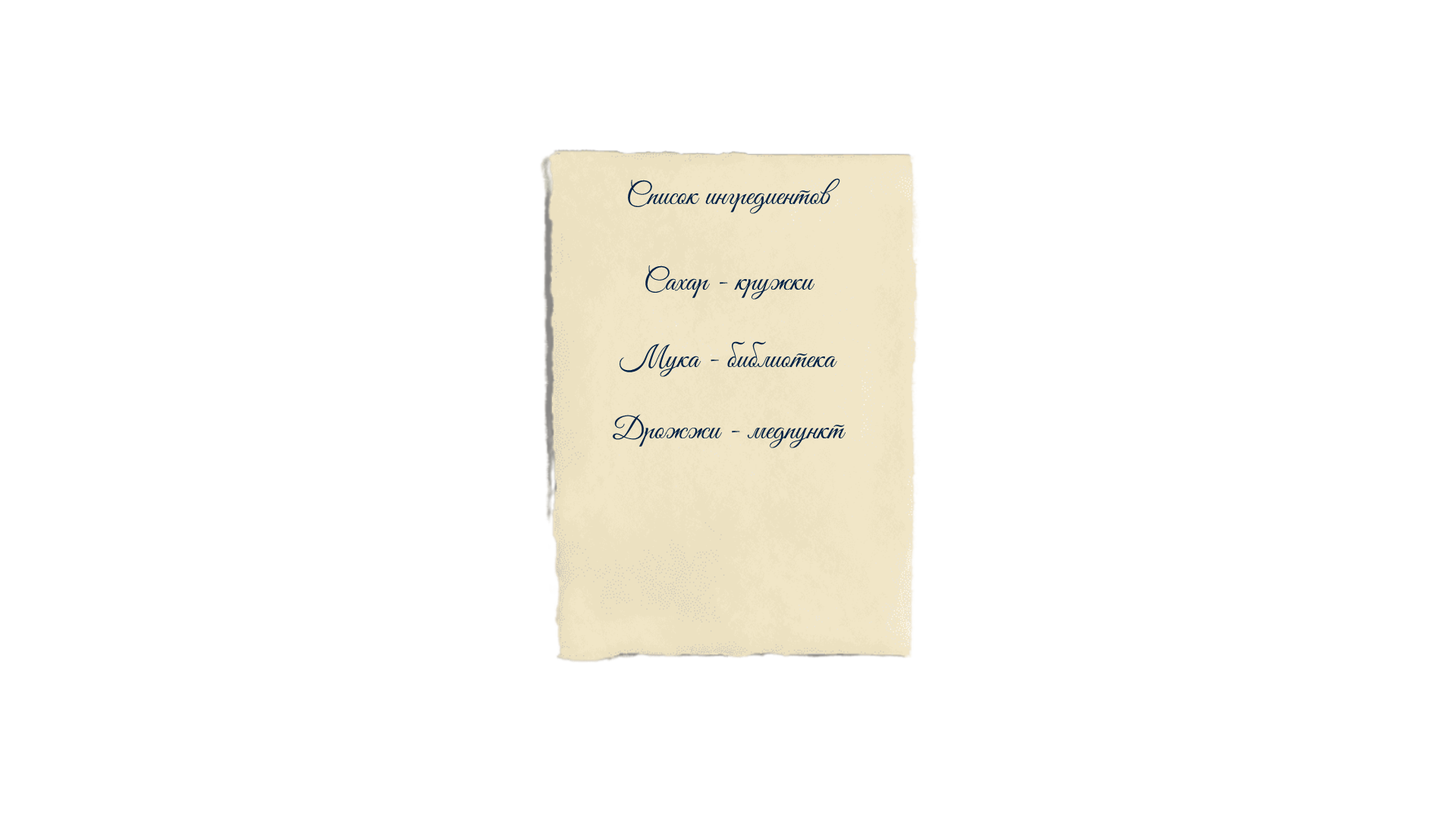
<style>
.page{position:relative;width:1456px;height:819px;background:#ffffff}
.page>*{position:absolute;margin:0}
.t1{font:30.3px "GoodVibesPro";color:#002247}
</style>
<div class="page">
<p class="t1" style="left:628px;top:178px;width:212px;height:36px">Список ингредиентов</p>
<p class="t1" style="left:645px;top:265px;width:170px;height:35px">Сахар - кружки</p>
<p class="t1" style="left:619px;top:341px;width:218px;height:36px">Мука - библиотека</p>
<p class="t1" style="left:612px;top:414px;width:234px;height:34px">Дрожжи - медпункт</p>
</div>
